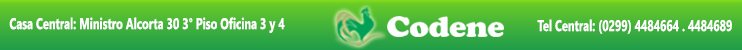
<style>
.page{position:relative;width:742px;height:50px}
.page>*{position:absolute;margin:0}
.t1{font:15.6px "SegoeUI-Bold";color:#ffffff;scale:0.7 1}
</style>
<div class="page">
<p class="t1" style="left:9px;top:17px;width:276px;height:16px">Casa Central: Ministro Alcorta 30 3° Piso Oficina 3 y 4</p>
<p class="t1" style="left:537px;top:19px;width:195px;height:15px">Tel Central: (0299) 4484664 . 4484689</p>
</div>
